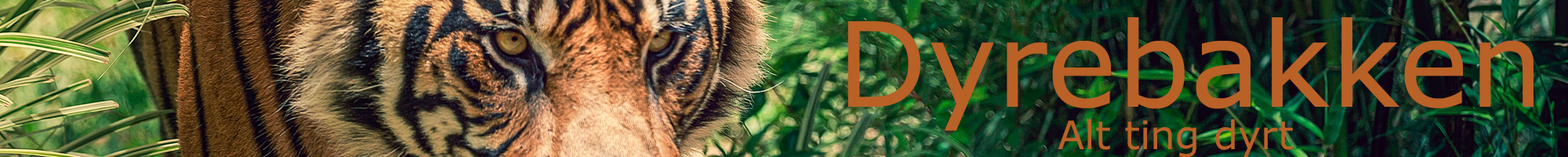
<style>
.page{position:relative;width:1568px;height:157px}
.page>*{position:absolute;margin:0}
.t1{font:117.6px "MSReferenceSansSerif";color:#b96127}
.t2{font:39.2px "MSReferenceSansSerif";color:#b96127}
</style>
<div class="page">
<p class="t1" style="left:848px;top:17px;width:686px;height:114px">Dyrebakken</p>
<p class="t2" style="left:1058px;top:119px;width:235px;height:39px">Alt ting dyrt</p>
</div>
